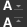
<style>
.page{position:relative;width:27px;height:27px;background:#333333}
.page>*{position:absolute;margin:0}
.t1{font:13px/17px "Helvetica-Bold";color:#ffffff}
</style>
<div class="page">
<p class="t1" style="left:3px;top:0px;width:9px;height:27px">A<br>A</p>
</div>
